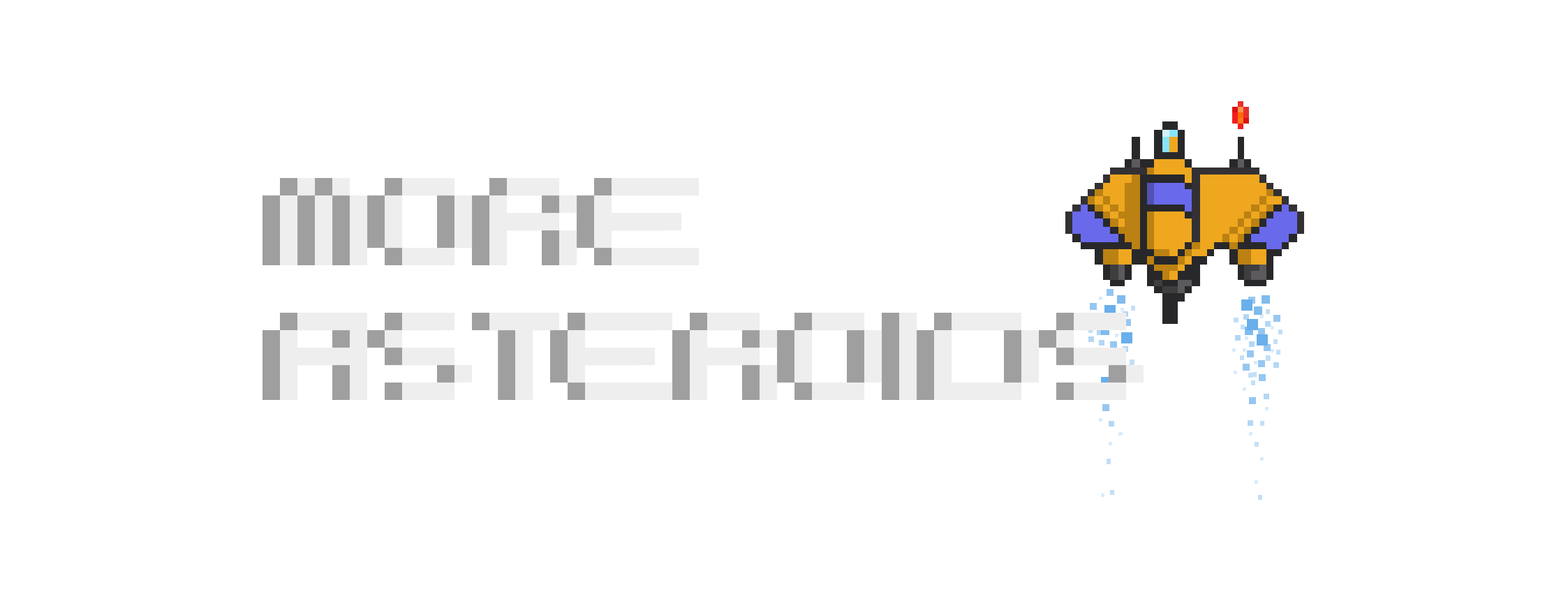
<style>
.page{position:relative;width:1568px;height:601px;background:#ffffff}
.page>*{position:absolute;margin:0}
.t1{font:174.5px/134.7px "BooCity"}
</style>
<div class="page">
<p class="t1" style="left:262px;top:178px;width:864px;height:222px">MORE<br>ASTEROIDS</p>
</div>
